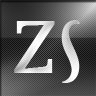
<style>
.page{position:relative;width:96px;height:96px}
.page>*{position:absolute;margin:0}
.t1{font:72px "EnvisionRoman";font-weight:bold}
</style>
<div class="page">
<p class="t1" style="left:14px;top:20px;width:66px;height:63px">ZS</p>
</div>
